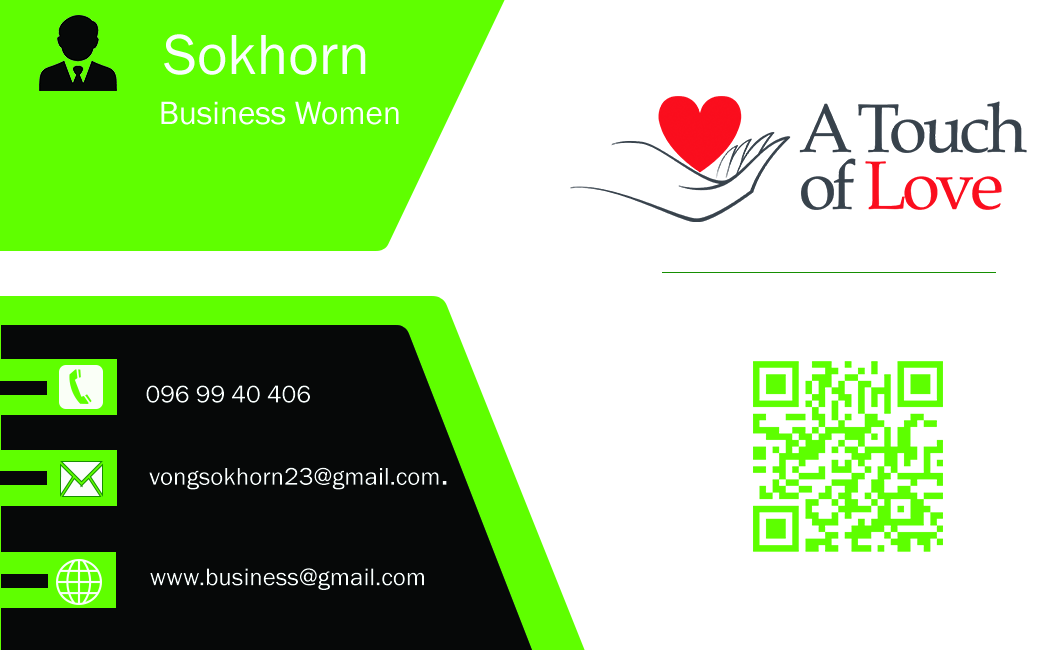
<style>
.page{position:relative;width:1063px;height:650px;background:#ffffff}
.page>*{position:absolute;margin:0}
.t1{font:58.6px "FranklinGothic-Book";color:#fafefd}
.t2{font:33.3px "FranklinGothic-Book";color:#fafefd}
.t3{font:25px "FranklinGothic-Book";color:#fafefd}
</style>
<div class="page">
<p class="t1" style="left:164px;top:34px;width:202px;height:41px">Sokhorn</p>
<p class="t2" style="left:161px;top:101px;width:238px;height:24px">Business Women</p>
<p class="t3" style="left:146px;top:385px;width:164px;height:18px">096 99 40 406</p>
<p class="t3" style="left:149px;top:467px;width:298px;height:23px">vongsokhorn23@gmail.com<span class="t2">.</span></p>
<p class="t3" style="left:150px;top:568px;width:274px;height:22px">www.business@gmail.com</p>
</div>
